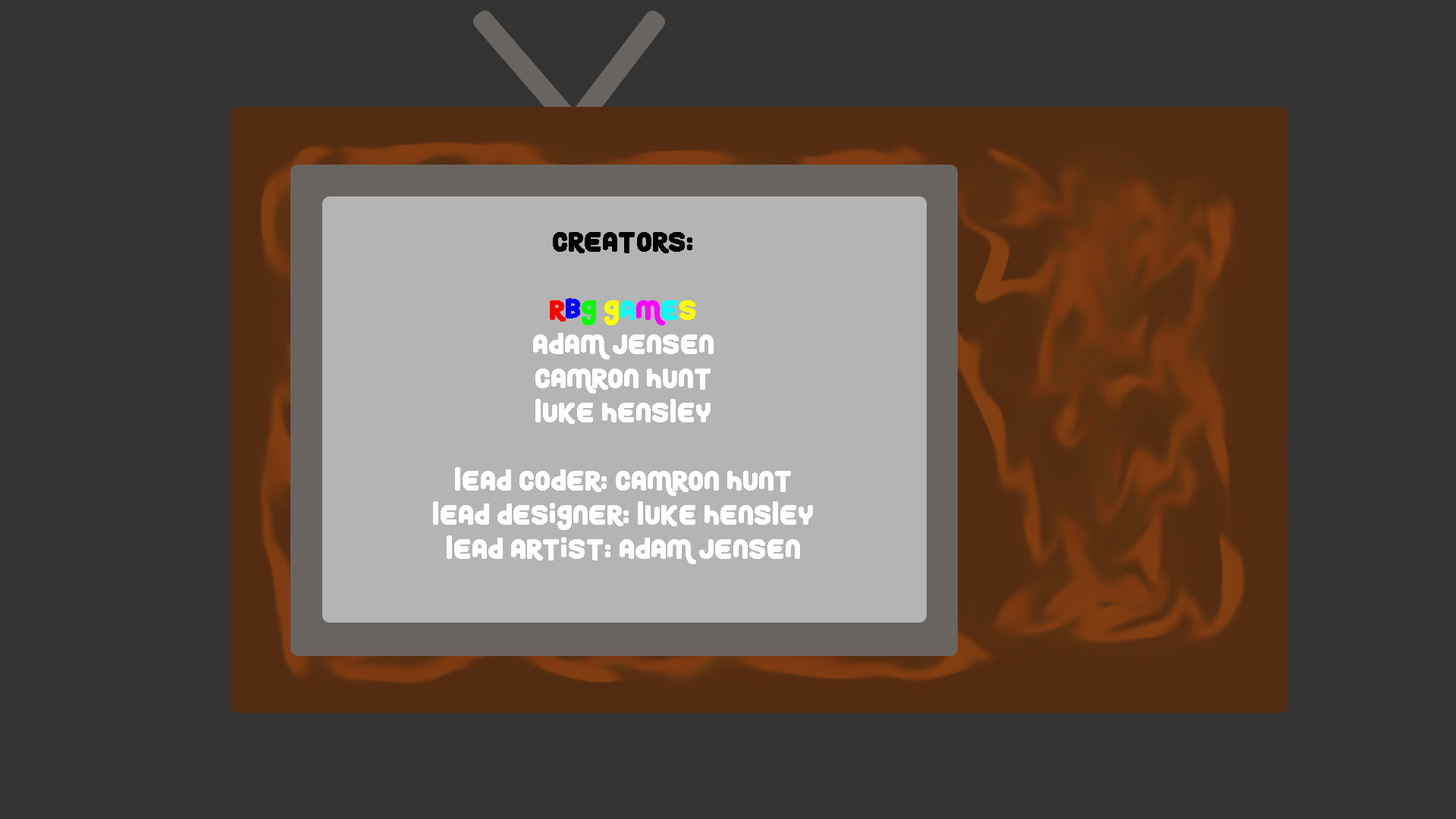
<style>
.page{position:relative;width:1456px;height:819px;background:#333333}
.page>*{position:absolute;margin:0}
.t1{font:28.4px "RoundyRainbows";color:#ffffff}
.t2{font:28.4px "RoundyRainbows";color:#000000}
.t3{font:28.4px "RoundyRainbows";color:#ff0000}
.t4{font:28.4px "RoundyRainbows";color:#0000ff}
.t5{font:28.4px "RoundyRainbows";color:#00ff00}
.t6{font:28.4px "RoundyRainbows";color:#ffff00}
.t7{font:28.4px "RoundyRainbows";color:#00ffff}
.t8{font:28.4px "RoundyRainbows";color:#ff00ff}
</style>
<div class="page">
<p class="t1" style="left:433px;top:232px;width:380px;height:332px;text-align:center"><span class="t2">Creators: <br><br></span><span class="t3">R</span><span class="t4">B</span><span class="t5">G </span><span class="t6">G</span><span class="t7">a</span><span class="t8">m</span><span class="t7">e</span><span class="t6">s<br></span>Adam Jensen<br>Camron Hunt<br>Luke hensley<br><br>Lead Coder: Camron Hunt<br>Lead Designer: Luke hensley<br>lead artist: adam Jensen</p>
</div>
